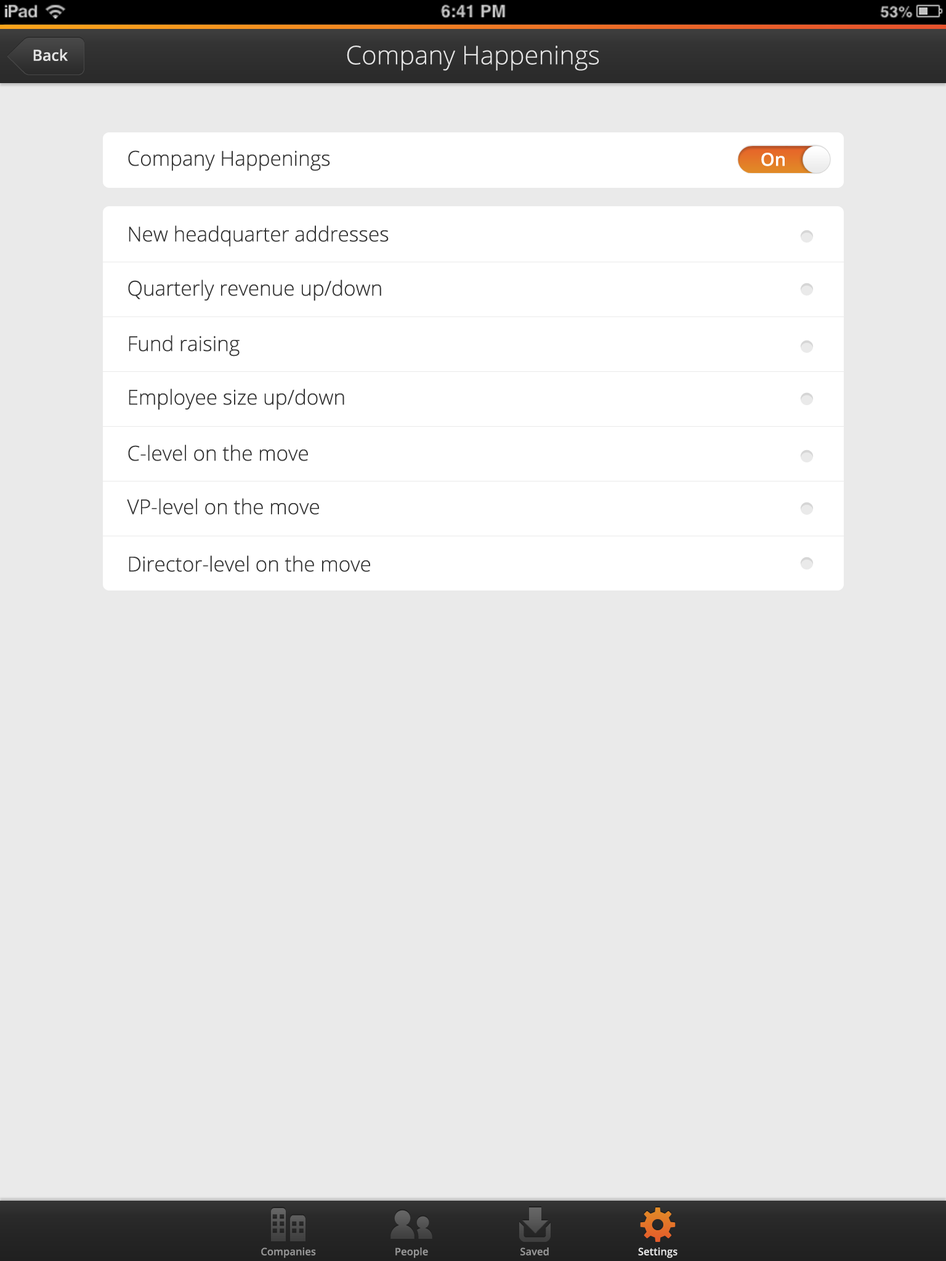
<style>
.page{position:relative;width:946px;height:1261px;background:#eaeaea}
.page>*{position:absolute;margin:0}
.t1{font:15.4px "OpenSans-Semibold";color:#e5e5e5}
.t2{font:25.7px "OpenSans-Light";color:#e5e5e5}
.t3{font:20.5px "OpenSans-Light";color:#343434}
.t4{font:18px "OpenSans-Semibold";color:#ffffff}
.t5{font:10.3px "OpenSans-Semibold";color:#969696}
.t6{font:10.3px "OpenSans-Semibold";color:#e5e5e5}
</style>
<div class="page">
<p class="t1" style="left:33px;top:49px;width:35px;height:12px">Back</p>
<p class="t2" style="left:347px;top:46px;width:252px;height:25px">Company Happenings</p>
<p class="t3" style="left:128px;top:150px;width:202px;height:21px">Company Happenings</p>
<p class="t4" style="left:761px;top:153px;width:23px;height:13px">On</p>
<p class="t3" style="left:129px;top:225px;width:259px;height:22px">New headquarter addresses</p>
<p class="t3" style="left:128px;top:280px;width:253px;height:21px">Quarterly revenue up/down</p>
<p class="t3" style="left:129px;top:335px;width:111px;height:21px">Fund raising</p>
<p class="t3" style="left:129px;top:388px;width:215px;height:22px">Employee size up/down</p>
<p class="t3" style="left:128px;top:445px;width:180px;height:16px">C-level on the move</p>
<p class="t3" style="left:127px;top:498px;width:192px;height:17px">VP-level on the move</p>
<p class="t3" style="left:129px;top:555px;width:241px;height:17px">Director-level on the move</p>
<p class="t5" style="left:261px;top:1247px;width:55px;height:11px">Companies</p>
<p class="t5" style="left:395px;top:1247px;width:33px;height:11px">People</p>
<p class="t5" style="left:520px;top:1247px;width:29px;height:8px">Saved</p>
<p class="t6" style="left:638px;top:1247px;width:39px;height:11px">Settings</p>
</div>
